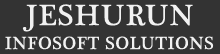
<style>
.page{position:relative;width:220px;height:54px;background:#333333}
.page>*{position:absolute;margin:0}
.t1{font:30px "PlantagenetCherokee";letter-spacing:0.04em;color:#f1f1f1}
.t2{font:18px "PlantagenetCherokee";letter-spacing:0.04em;color:#f1f1f1}
</style>
<div class="page">
<p class="t1" style="left:22px;top:4px;width:171px;height:28px">JESHURUN</p>
<p class="t2" style="left:5px;top:36px;width:209px;height:14px">INFOSOFT SOLUTIONS</p>
</div>
